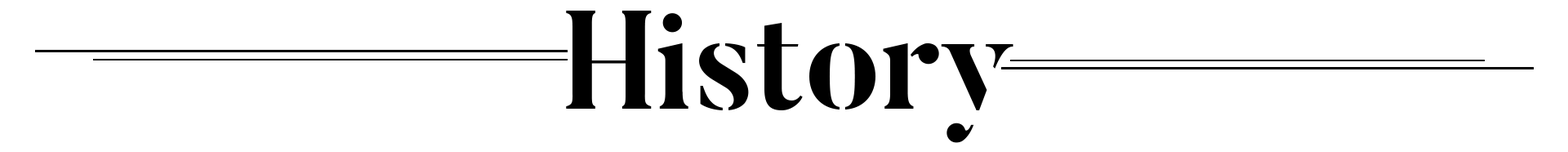
<style>
.page{position:relative;width:1568px;height:152px;background:#ffffff}
.page>*{position:absolute;margin:0}
.t1{font:138.8px "ButlerStencil-Bold";color:#000000}
</style>
<div class="page">
<p class="t1" style="left:566px;top:11px;width:447px;height:132px">History</p>
</div>
